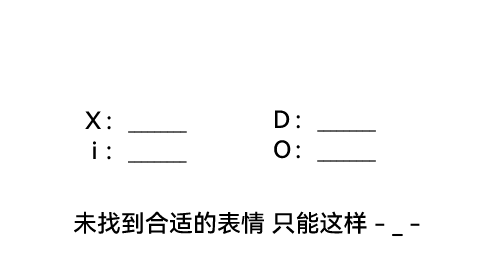
<style>
.page{position:relative;width:500px;height:273px;background:#ffffff}
.page>*{position:absolute;margin:0}
.t1{font:24px/30px "HarmonyOS_Sans_SC_Medium";color:#000000}
.t2{font:24px/30px "HarmonyOS_Sans_SC_Medium";letter-spacing:0.12em;color:#000000}
.t3{font:24px/30px "HarmonyOS_Sans_SC_Medium";letter-spacing:0.072em;color:#000000}
.t4{font:24px "HarmonyOS_Sans_SC_Medium";color:#000000}
</style>
<div class="page">
<p class="t1" style="left:85px;top:111px;width:102px;height:52px"><span class="t2">X：         <br> </span>i ：</p>
<p class="t2" style="left:274px;top:110px;width:102px;height:52px">D：         <br><span class="t3">O：</span></p>
<p class="t4" style="left:73px;top:211px;width:347px;height:26px">未找到合适的表情 只能这样 - _ -</p>
</div>
